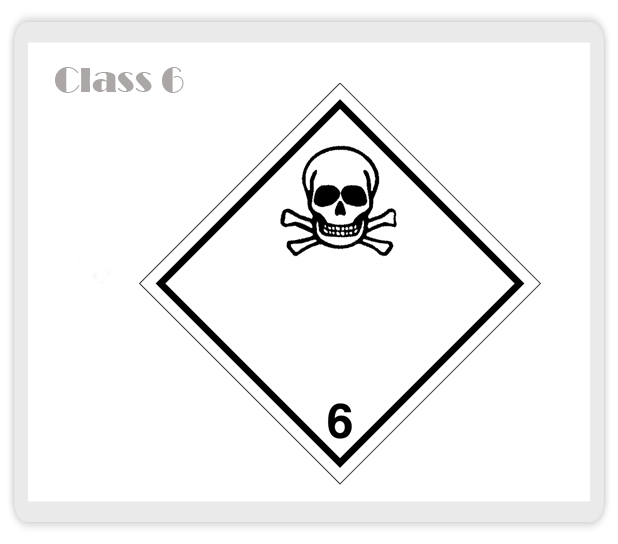
<style>
.page{position:relative;width:618px;height:544px;background:#ffffff}
.page>*{position:absolute;margin:0}
.t1{font:36px "Broadway";color:#aca7a7}
</style>
<div class="page">
<p class="t1" style="left:55px;top:67px;width:129px;height:26px">Class 6</p>
</div>
